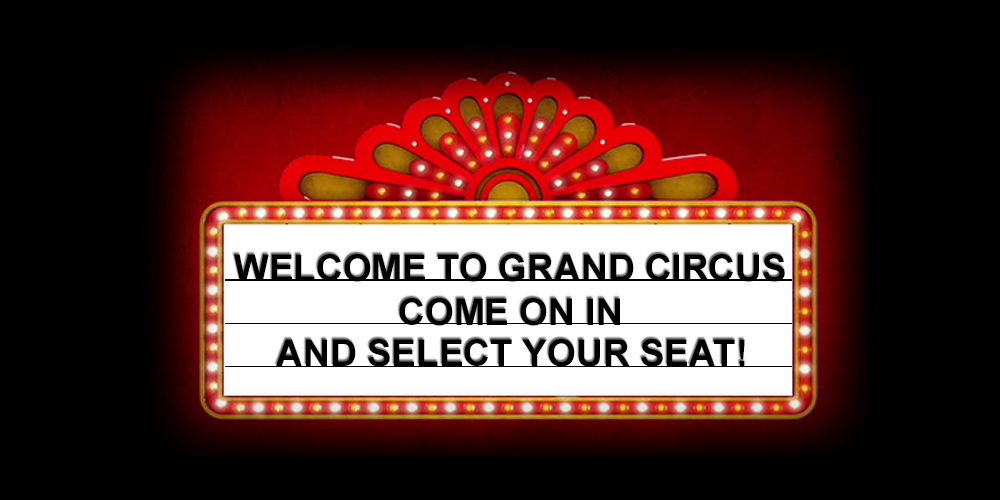
<style>
.page{position:relative;width:1000px;height:500px;background:#000000}
.page>*{position:absolute;margin:0}
.t1{font:37.1px "Arial-BoldMT";color:#000000}
</style>
<div class="page">
<p class="t1" style="left:234px;top:254px;width:551px;height:28px">WELCOME TO GRAND CIRCUS</p>
<p class="t1" style="left:399px;top:298px;width:221px;height:28px">COME ON IN</p>
<p class="t1" style="left:276px;top:339px;width:469px;height:28px">AND SELECT YOUR SEAT!</p>
</div>
